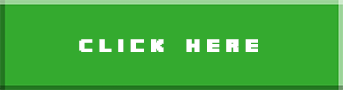
<style>
.page{position:relative;width:343px;height:90px;background:#34aa2f}
.page>*{position:absolute;margin:0}
.t1{font:16.1px "Minecrafter";letter-spacing:0.28em;color:#ffffff;scale:1.27 1}
</style>
<div class="page">
<p class="t1" style="left:79px;top:39px;width:179px;height:13px">Click here</p>
</div>
